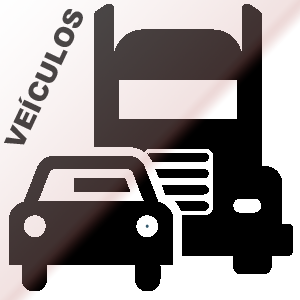
<style>
.page{position:relative;width:300px;height:300px;background:#000000}
.page>*{position:absolute;margin:0}
.t1{font:26.6px "Arial-Black";color:#494544}
</style>
<div class="page">
<p class="t1" style="left:4px;top:9px;width:79px;height:136px;rotate:-65deg">VEÍCULOS</p>
</div>
